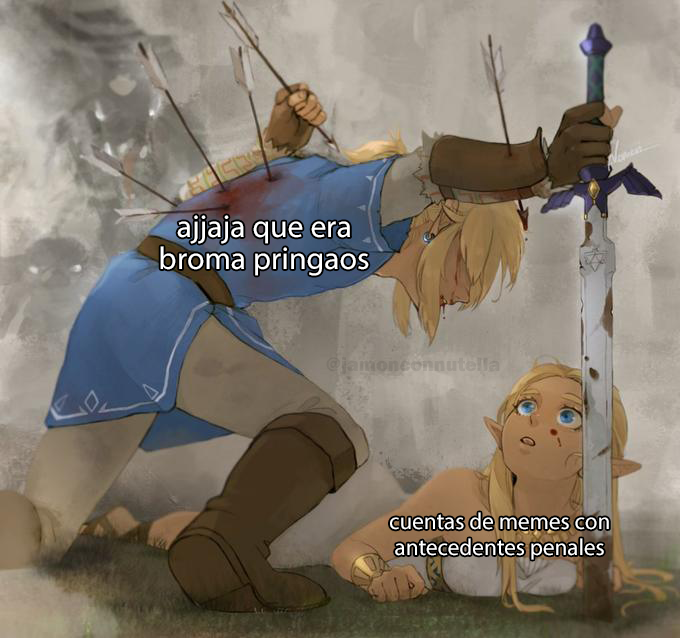
<style>
.page{position:relative;width:680px;height:638px}
.page>*{position:absolute;margin:0}
.t1{font:31.8px "MyriadPro-Regular";color:#ffffff}
.t2{font:20.1px "FranklinGothic-Heavy";color:#968e84}
.t3{font:23.1px "MyriadPro-Regular";color:#ffffff}
</style>
<div class="page">
<p class="t1" style="left:160px;top:215px;width:209px;height:61px;text-align:center">ajjaja que era<br>broma pringaos</p>
<p class="t2" style="left:326px;top:357px;width:174px;height:18px">@jamonconnutella</p>
<p class="t3" style="left:390px;top:512px;width:219px;height:48px;text-align:center">cuentas de memes con<br>antecedentes penales</p>
</div>
